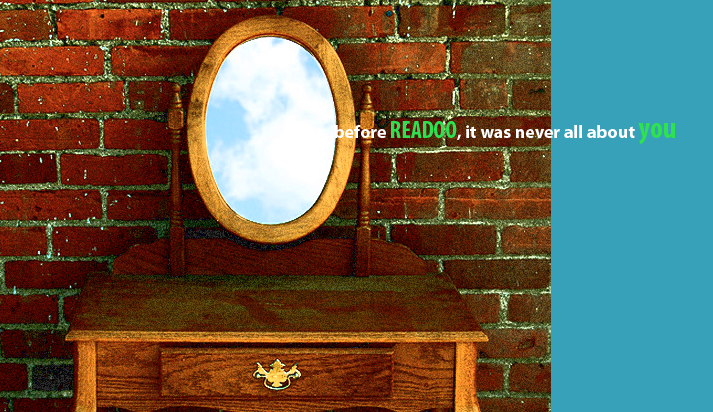
<style>
.page{position:relative;width:713px;height:412px;background:#36a1b9}
.page>*{position:absolute;margin:0}
.t1{font:18px "MyriadPro-Bold";color:#ffffff}
.t2{font:24px "MyriadPro-BoldCond";color:#2ee150}
.t3{font:30px "MyriadPro-BoldCond";color:#2ee150}
</style>
<div class="page">
<p class="t1" style="left:335px;top:121px;width:340px;height:24px">before <span class="t2">READOO</span>, it was never all about <span class="t3">you</span></p>
</div>
